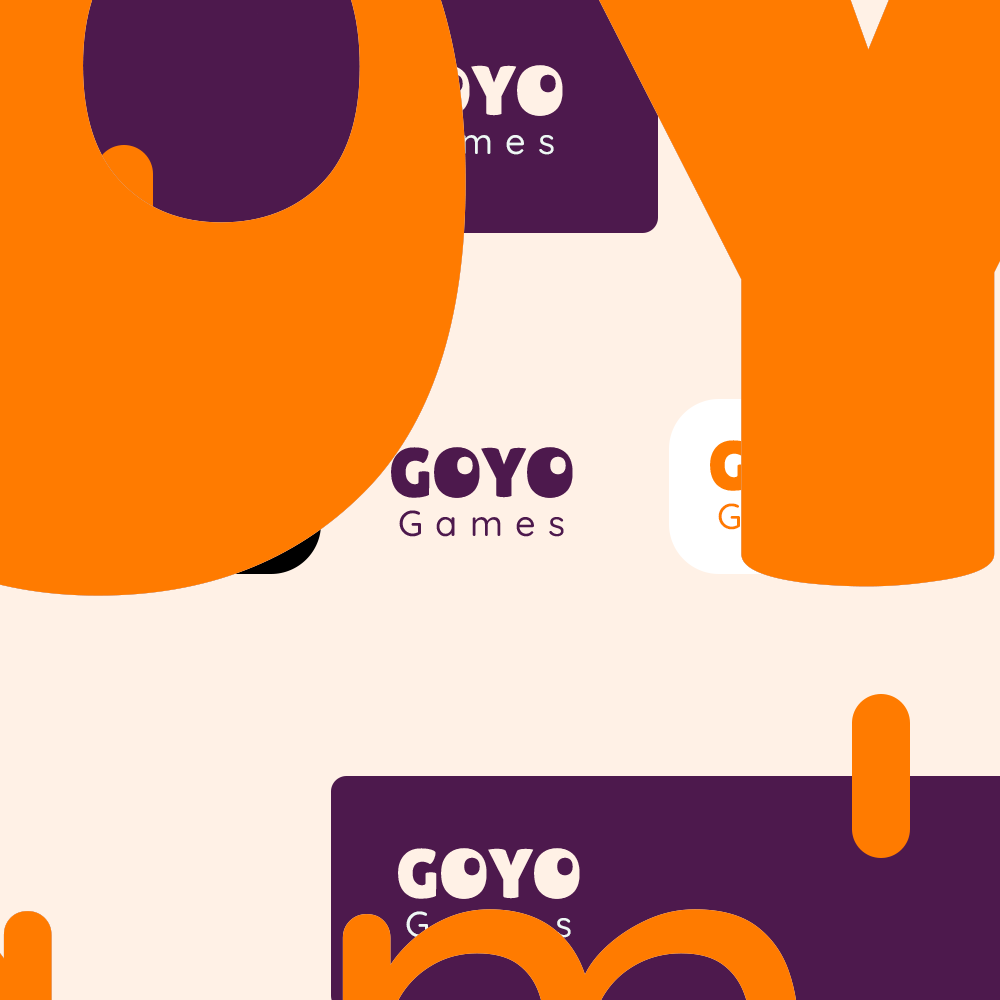
<style>
.page{position:relative;width:1000px;height:1000px;background:#ff7b00}
.page>*{position:absolute;margin:0}
.t1{font:70px "LilitaOne";letter-spacing:0.005em}
.t2{font:36px "Quicksand-Medium";letter-spacing:0.35em}
.t3{font:70px "LilitaOne";letter-spacing:0.005em;color:#fff1e6}
</style>
<div class="page">
<p class="t1" style="left:381px;top:65px;width:182px;height:51px">GOYO</p>
<p class="t2" style="left:389px;top:128px;width:165px;height:27px">Games</p>
<p class="t3" style="left:398px;top:848px;width:182px;height:51px">GOYO</p>
<p class="t2" style="left:406px;top:911px;width:165px;height:27px">Games</p>
</div>
